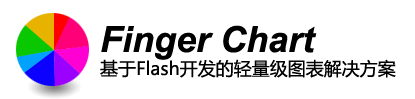
<style>
.page{position:relative;width:415px;height:99px;background:#ffffff}
.page>*{position:absolute;margin:0}
.t1{font:36px "Arial-BoldItalicMT";color:#000000}
.t2{font:18px "MicrosoftYaHei";color:#000000}
</style>
<div class="page">
<p class="t1" style="left:101px;top:25px;width:216px;height:35px">Finger Chart</p>
<p class="t2" style="left:100px;top:59px;width:296px;height:19px">基于Flash开发的轻量级图表解决方案</p>
</div>
